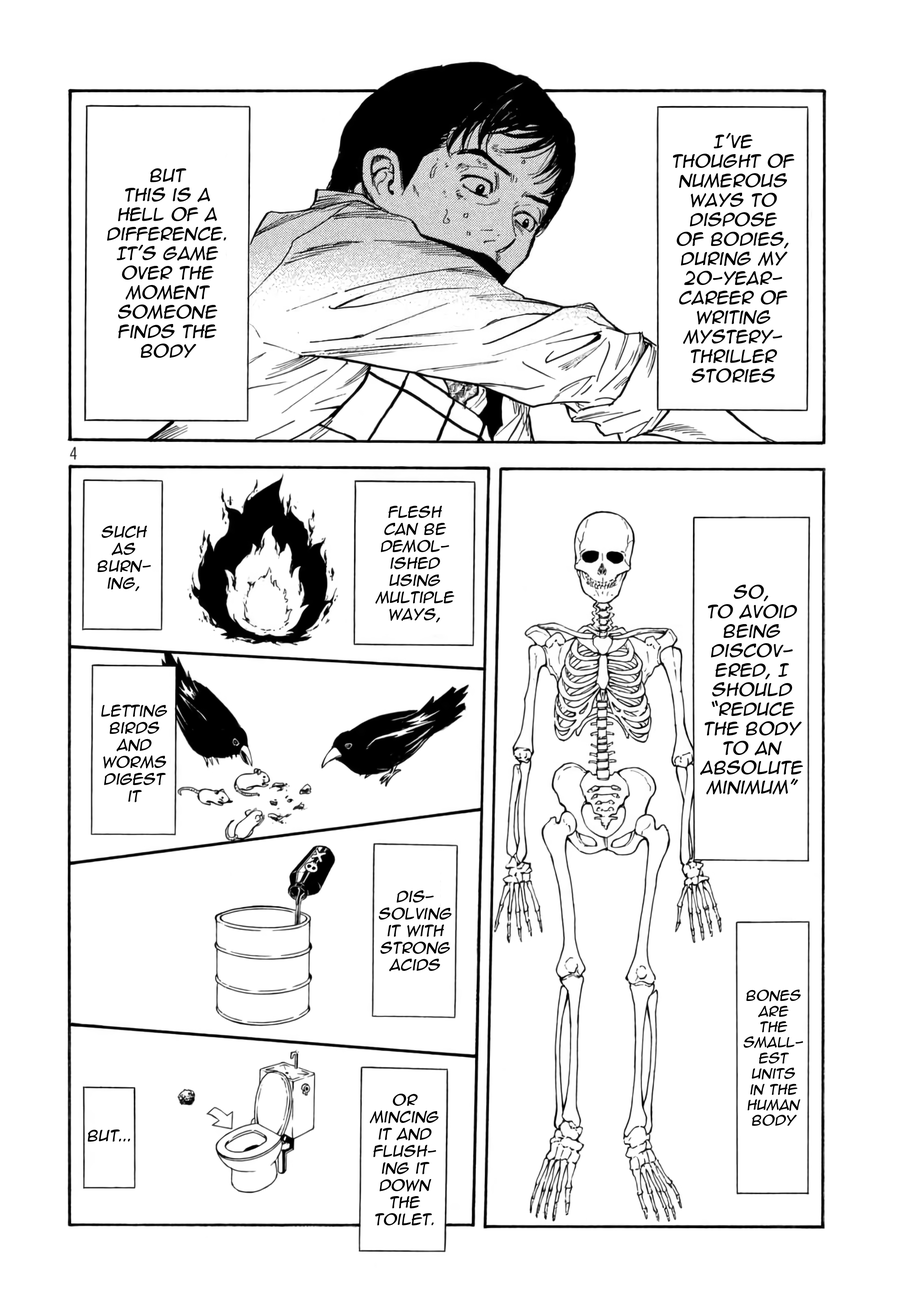
<style>
.page{position:relative;width:916px;height:1301px;background:#ffffff}
.page>*{position:absolute;margin:0}
.t1{font:16.3px "AnimeAce2.0BB";color:#000000;font-style:italic}
.t2{font:14.2px "AnimeAce2.0BB";color:#000000;font-style:italic}
.t3{font:13px "AnimeAce2.0BB";color:#000000;font-style:italic}
</style>
<div class="page">
<p class="t1" style="left:673px;top:133px;width:122px;height:250px;text-align:center">I’ve <br>thought of numerous ways to dispose <br>of bodies, during my 20-year-<br>career of writing mystery-<br>thriller stories</p>
<p class="t1" style="left:107px;top:168px;width:119px;height:190px;text-align:center">But <br>this is a <br>hell of a difference. It's game over the moment someone finds the body</p>
<p class="t2" style="left:376px;top:506px;width:79px;height:117px;text-align:center">Flesh <br>can be demol-<br>ished <br>using multiple ways,</p>
<p class="t2" style="left:98px;top:526px;width:53px;height:65px;text-align:center">such as burn-<br>ing,</p>
<p class="t1" style="left:701px;top:585px;width:102px;height:209px;text-align:center">So, <br>to avoid being discov-<br>ered, I should “reduce the body to an absolute minimum”</p>
<p class="t2" style="left:101px;top:705px;width:66px;height:97px;text-align:center">Letting birds and worms digest it</p>
<p class="t2" style="left:379px;top:890px;width:73px;height:81px;text-align:center">Dis-<br>solving it with strong acids</p>
<p class="t3" style="left:744px;top:990px;width:59px;height:136px;text-align:center">Bones are <br>the small-<br>est units <br>in the human body</p>
<p class="t2" style="left:370px;top:1094px;width:69px;height:131px;text-align:center">Or mincing it and flush-<br>ing it down the toilet.</p>
<p class="t2" style="left:88px;top:1130px;width:43px;height:12px">But...</p>
</div>
